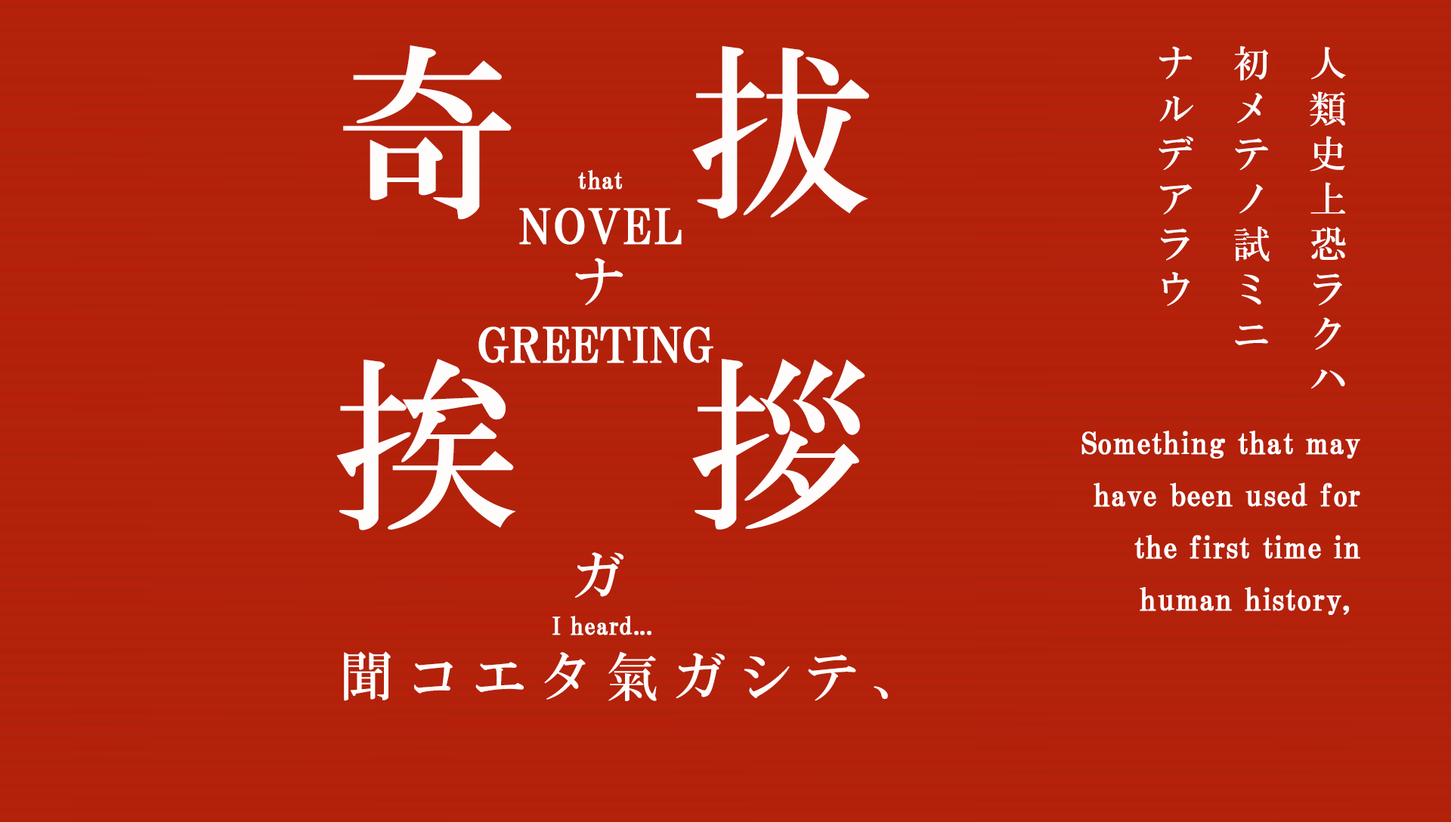
<style>
.page{position:relative;width:1451px;height:822px}
.page>*{position:absolute;margin:0}
.t1{font:185.9px/312px "HGMinchoB";letter-spacing:0.91em;color:#fffcfc}
.t2{font:37px/76.3px "HGMinchoB";letter-spacing:0.22em;color:#fffcfc}
.t3{font:24.2px "HGPMinchoB";letter-spacing:0.01em;color:#ffffff;font-weight:bold}
.t4{font:48.4px "HGPMinchoB";letter-spacing:0.01em;color:#ffffff;font-weight:bold}
.t5{font:53.6px "HGMinchoB";letter-spacing:0.91em;color:#fffcfc}
.t6{font:48.4px "HGPMinchoB";letter-spacing:-0.025em;color:#ffffff;text-transform:uppercase;font-weight:bold}
.t7{font:30.2px/52.1px "HGPMinchoB";letter-spacing:0.01em;color:#ffffff;font-weight:bold}
.t8{font:53.6px "HGMinchoB";letter-spacing:0.24em;color:#fffcfc}
</style>
<div class="page">
<p class="t1" style="left:336px;top:45px;width:533px;height:485px">奇拔<br>挨拶</p>
<p class="t2" style="left:1158px;top:46px;width:188px;height:343px">人類史上恐ラクハ<br>初メテノ試ミニ<br>ナルデアラウ</p>
<p class="t3" style="left:578px;top:170px;width:44px;height:20px">that</p>
<p class="t4" style="left:519px;top:208px;width:162px;height:37px">NOVEL</p>
<p class="t5" style="left:575px;top:258px;width:48px;height:47px">ナ</p>
<p class="t6" style="left:478px;top:326px;width:235px;height:37px">greeting</p>
<p class="t7" style="left:1081px;top:431px;width:279px;height:184px;text-align:right">Something that may<br>have been used for<br>the first time in<br>human history,</p>
<p class="t5" style="left:575px;top:552px;width:48px;height:46px">ガ</p>
<p class="t3" style="left:552px;top:616px;width:99px;height:19px">I heard...</p>
<p class="t8" style="left:344px;top:651px;width:544px;height:50px">聞コエタ氣ガシテ、</p>
</div>
